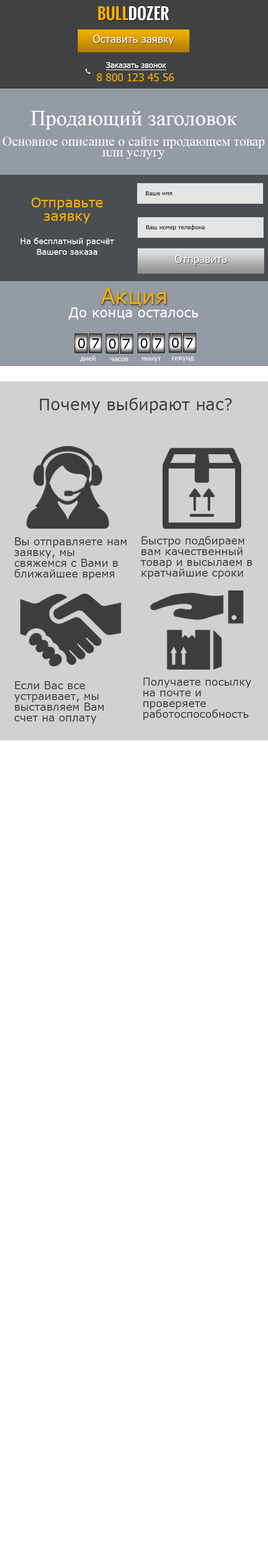
<style>
.page{position:relative;width:268px;height:1568px;background:#ffffff}
.page>*{position:absolute;margin:0}
.t1{font:10.7px "Tahoma";color:#ffffff}
.t2{font:8px/13.4px "Tahoma";color:#ffffff;text-decoration:underline}
.t3{font:10.7px/13.4px "Tahoma";color:#f3af00}
.t4{font:21.5px "TimesNewRomanPSMT";color:#ffffff}
.t5{font:13.4px "TimesNewRomanPSMT";color:#ffffff}
.t6{font:13.4px/13.4px "Verdana";color:#f3af00}
.t7{font:5.4px "Verdana";color:#000000}
.t8{font:8px/10.7px "Verdana";color:#ffffff}
.t9{font:21.5px "Verdana";color:#f3af00}
.t10{font:13.4px "Verdana";color:#fefefe}
.t11{font:13.4px "Verdana";color:#010101}
.t12{font:6.3px "Verdana";color:#ffffff}
.t13{font:16.1px "Verdana";color:#3b3d3e}
.t14{font:10.7px/10.7px "Verdana";color:#3b3d3e}
</style>
<div class="page">
<p class="t1" style="left:93px;top:35px;width:81px;height:10px">Оставить заявку</p>
<p class="t2" style="left:97px;top:62px;width:77px;height:19px;text-align:center">Заказать звонок <br><span class="t3">8 800 123 45 56</span></p>
<p class="t4" style="left:30px;top:111px;width:207px;height:19px">Продающий заголовок</p>
<p class="t5" style="left:3px;top:137px;width:262px;height:22px">Основное описание о сайте продающем товар или услугу</p>
<p class="t6" style="left:31px;top:198px;width:72px;height:25px;text-align:center">Отправьте заявку</p>
<p class="t7" style="left:146px;top:191px;width:26px;height:4px">Ваше имя</p>
<p class="t7" style="left:146px;top:225px;width:59px;height:5px">Ваш номер телефона</p>
<p class="t8" style="left:21px;top:238px;width:93px;height:17px;text-align:center">На бесплатный расчёт Вашего заказа</p>
<p class="t1" style="left:175px;top:255px;width:52px;height:10px">Отправить</p>
<p class="t9" style="left:101px;top:288px;width:65px;height:19px">Акция</p>
<p class="t10" style="left:69px;top:308px;width:129px;height:12px">До конца осталось</p>
<p class="t11" style="left:78px;top:338px;width:7px;height:10px">0</p>
<p class="t11" style="left:92px;top:338px;width:7px;height:10px">7</p>
<p class="t11" style="left:109px;top:339px;width:7px;height:10px">0</p>
<p class="t11" style="left:123px;top:339px;width:7px;height:10px">7</p>
<p class="t11" style="left:141px;top:338px;width:7px;height:10px">0</p>
<p class="t11" style="left:155px;top:338px;width:7px;height:10px">7</p>
<p class="t11" style="left:172px;top:338px;width:7px;height:10px">0</p>
<p class="t11" style="left:186px;top:338px;width:7px;height:10px">7</p>
<p class="t12" style="left:80px;top:356px;width:16px;height:6px">дней</p>
<p class="t12" style="left:110px;top:358px;width:19px;height:3px">часов</p>
<p class="t12" style="left:142px;top:357px;width:19px;height:5px">минут</p>
<p class="t12" style="left:172px;top:357px;width:22px;height:5px">секунд</p>
<p class="t13" style="left:40px;top:398px;width:192px;height:15px">Почему выбирают нас?</p>
<p class="t14" style="left:14px;top:537px;width:112px;height:43px">Вы отправляете нам заявку, мы свяжемся с Вами в ближайшее время</p>
<p class="t14" style="left:141px;top:536px;width:112px;height:43px">Быстро подбираем вам качественный товар и высылаем в кратчайшие сроки</p>
<p class="t14" style="left:143px;top:678px;width:109px;height:42px">Получаете посылку на почте и проверяете работоспособность товара</p>
<p class="t14" style="left:14px;top:681px;width:90px;height:43px">Если Вас все устраивает, мы выставляем Вам счет на оплату наших услуг</p>
</div>
